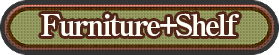
<style>
.page{position:relative;width:279px;height:55px}
.page>*{position:absolute;margin:0}
.t1{font:30px "RyuminPro-ExBold";letter-spacing:-0.08em;color:#fffff7}
</style>
<div class="page">
<p class="t1" style="left:41px;top:13px;width:198px;height:23px">Furniture+Shelf</p>
</div>
